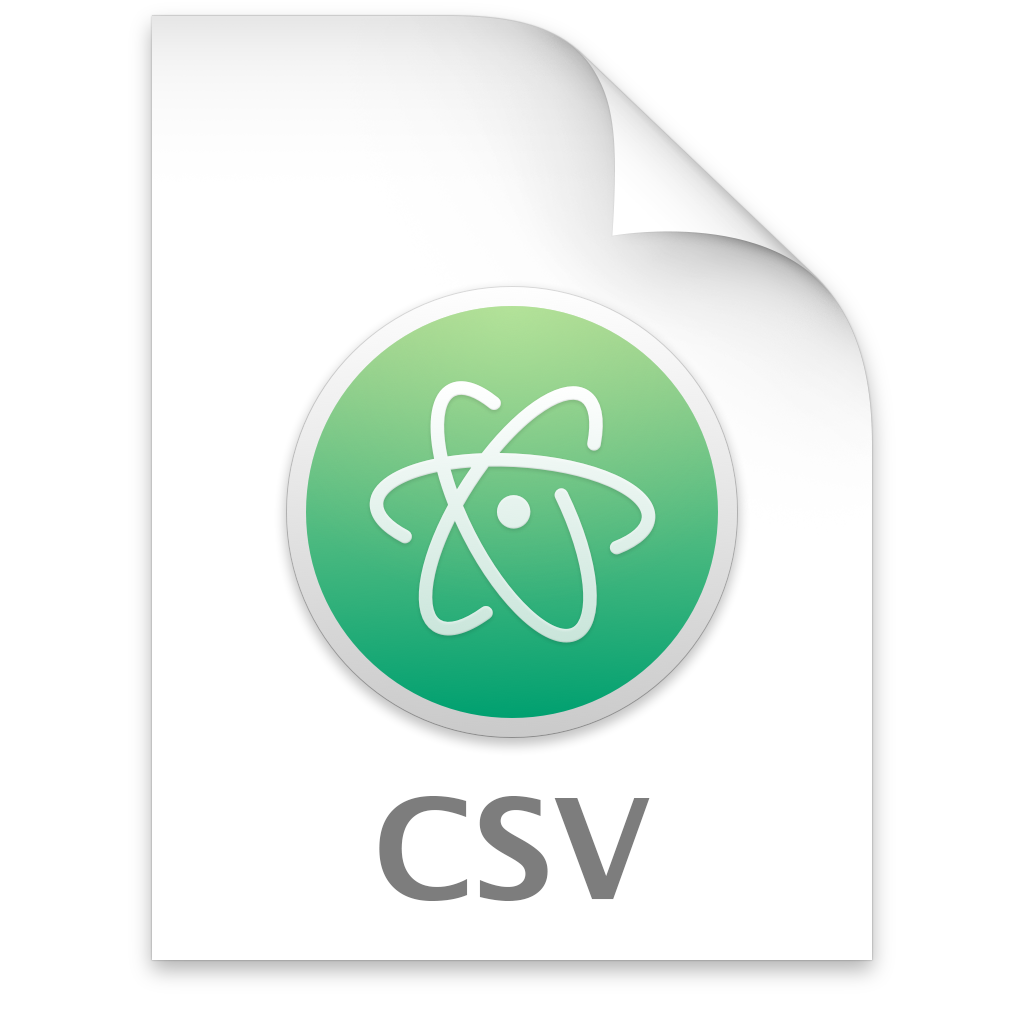
<style>
.page{position:relative;width:1024px;height:1024px;background:#ffffff}
.page>*{position:absolute;margin:0}
.t1{font:140px "LucidaGrande-Bold";color:#7d7d7d}
</style>
<div class="page">
<p class="t1" style="left:379px;top:796px;width:271px;height:105px">CSV</p>
</div>
